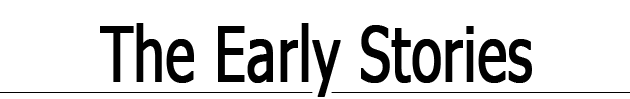
<style>
.page{position:relative;width:630px;height:99px;background:#ffffff}
.page>*{position:absolute;margin:0}
.t1{font:75.9px "Tahoma";color:#000000;font-weight:bold;scale:0.72 1}
</style>
<div class="page">
<p class="t1" style="left:100px;top:23px;width:432px;height:74px">The Early Stories</p>
</div>
